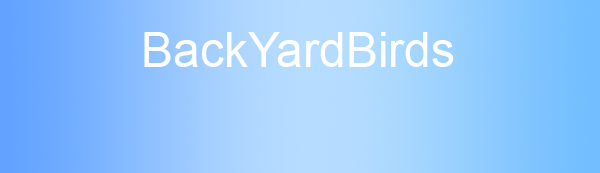
<style>
.page{position:relative;width:600px;height:173px}
.page>*{position:absolute;margin:0}
.t1{font:48px "ArialMT";color:#ffffff}
</style>
<div class="page">
<p class="t1" style="left:144px;top:32px;width:310px;height:35px">BackYardBirds</p>
</div>
